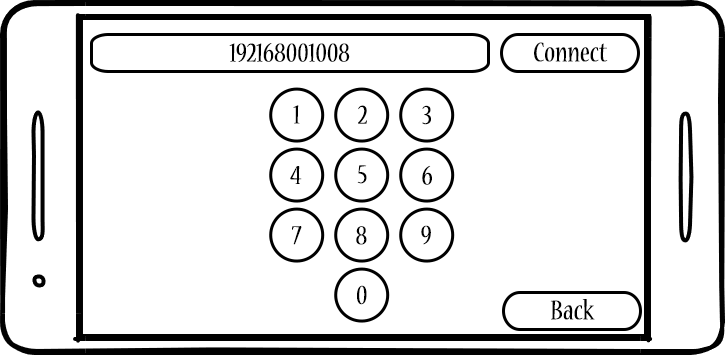
<style>
.page{position:relative;width:725px;height:356px;background:#ffffff}
.page>*{position:absolute;margin:0}
.t1{font:30px "NuevaStd-Cond";color:#000000}
</style>
<div class="page">
<p class="t1" style="left:229px;top:43px;width:121px;height:19px">192168001008</p>
<p class="t1" style="left:534px;top:42px;width:74px;height:20px">Connect</p>
<p class="t1" style="left:293px;top:105px;width:7px;height:19px">1</p>
<p class="t1" style="left:358px;top:105px;width:9px;height:19px">2</p>
<p class="t1" style="left:422px;top:105px;width:9px;height:20px">3</p>
<p class="t1" style="left:290px;top:166px;width:12px;height:18px">4</p>
<p class="t1" style="left:357px;top:165px;width:10px;height:19px">5</p>
<p class="t1" style="left:422px;top:165px;width:10px;height:20px">6</p>
<p class="t1" style="left:292px;top:226px;width:10px;height:19px">7</p>
<p class="t1" style="left:356px;top:226px;width:11px;height:19px">8</p>
<p class="t1" style="left:421px;top:225px;width:10px;height:20px">9</p>
<p class="t1" style="left:357px;top:285px;width:10px;height:20px">0</p>
<p class="t1" style="left:550px;top:299px;width:45px;height:21px">Back</p>
</div>
